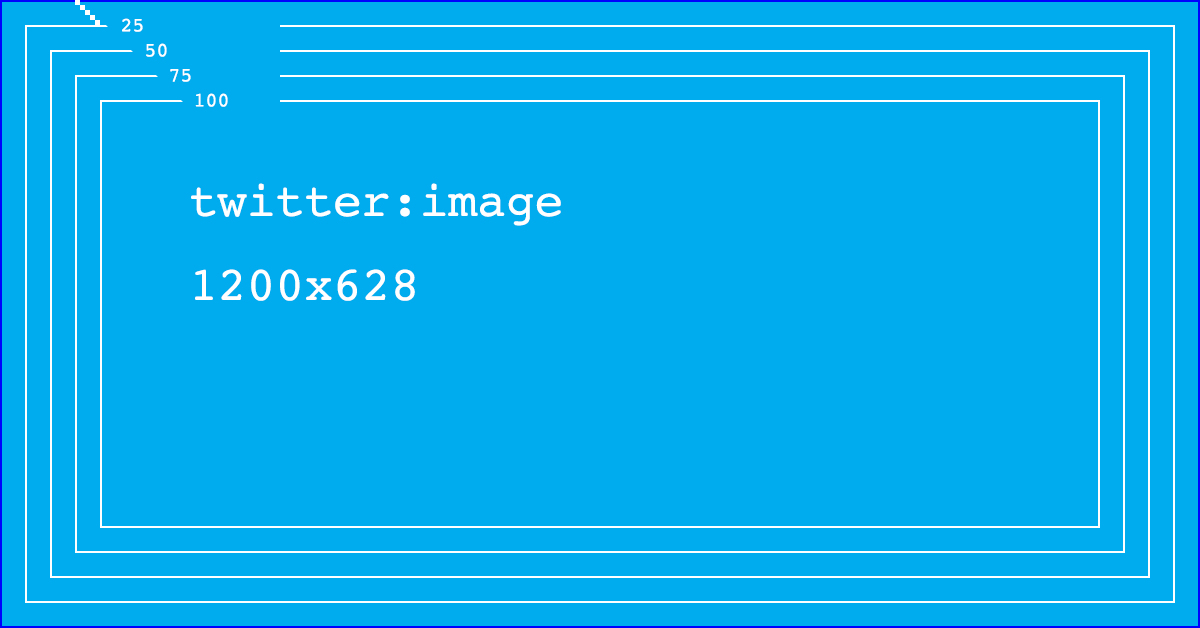
<style>
.page{position:relative;width:1200px;height:628px;background:#00aced}
.page>*{position:absolute;margin:0}
.t1{font:20px "Courier";color:#ffffff}
.t2{font:48px "Courier";color:#ffffff}
</style>
<div class="page">
<p class="t1" style="left:122px;top:18px;width:21px;height:14px">25</p>
<p class="t1" style="left:146px;top:43px;width:21px;height:14px">50</p>
<p class="t1" style="left:170px;top:69px;width:21px;height:13px">75</p>
<p class="t1" style="left:195px;top:93px;width:33px;height:14px">100</p>
<p class="t2" style="left:191px;top:183px;width:370px;height:118px">twitter:image<br>1200x628</p>
</div>
